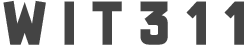
<style>
.page{position:relative;width:248px;height:46px;background:#ffffff}
.page>*{position:absolute;margin:0}
.t1{font:57px "MrHeadlinesFancy";letter-spacing:0.23em;color:#444444}
</style>
<div class="page">
<p class="t1" style="left:3px;top:0px;width:241px;height:45px">WIT311</p>
</div>
